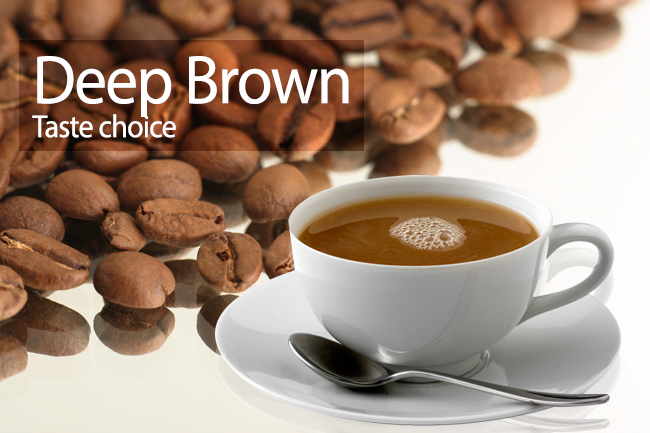
<style>
.page{position:relative;width:650px;height:433px}
.page>*{position:absolute;margin:0}
.t1{font:32px/33.9px "MyriadPro-Regular";letter-spacing:-0.025em;color:#ffffff;scale:0.94 1}
.t2{font:69.3px/33.9px "MyriadPro-Regular";letter-spacing:-0.025em;color:#ffffff;scale:0.94 1}
</style>
<div class="page">
<p class="t1" style="left:32px;top:56px;width:317px;height:82px"><span class="t2">Deep Brown<br></span>Taste choice</p>
</div>
